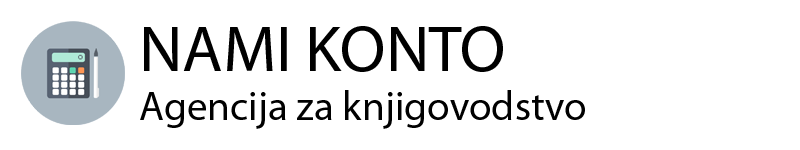
<style>
.page{position:relative;width:800px;height:150px;background:#ffffff}
.page>*{position:absolute;margin:0}
.t1{font:41px "MyriadPro-Regular";color:#000000}
.t2{font:66px "MyriadPro-Regular";color:#000000}
</style>
<div class="page">
<p class="t1" style="left:140px;top:26px;width:445px;height:103px"><span class="t2">NAMI KONTO<br></span>Agencija za knjigovodstvo</p>
</div>
